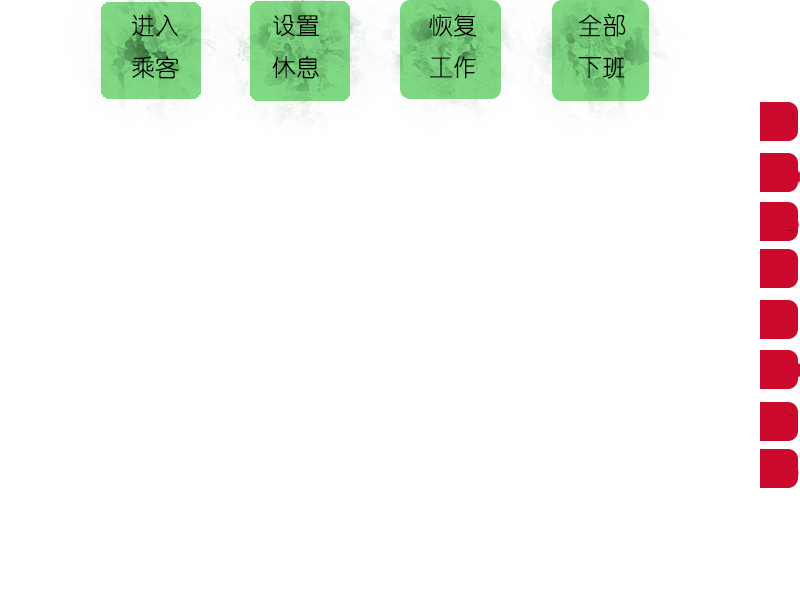
<style>
.page{position:relative;width:800px;height:600px;background:#ffffff}
.page>*{position:absolute;margin:0}
.t1{font:24px "YouYuan";color:#000000}
</style>
<div class="page">
<p class="t1" style="left:132px;top:14px;width:47px;height:65px">进入<br>乘客</p>
<p class="t1" style="left:272px;top:14px;width:47px;height:65px">设置<br>休息</p>
<p class="t1" style="left:429px;top:14px;width:48px;height:65px">恢复<br>工作</p>
<p class="t1" style="left:578px;top:13px;width:48px;height:66px">全部<br>下班</p>
</div>
